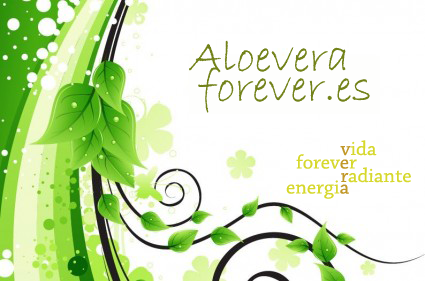
<style>
.page{position:relative;width:425px;height:281px;background:#ffffff}
.page>*{position:absolute;margin:0}
.t1{font:45.8px "BradleyHandITC";color:#728219}
.t2{font:20.8px "ChaparralPro-Regular";color:#d6d82c}
.t3{font:20.8px "ChaparralPro-Regular";color:#c19828}
</style>
<div class="page">
<p class="t1" style="left:189px;top:40px;width:157px;height:32px">Aloevera</p>
<p class="t1" style="left:198px;top:67px;width:172px;height:46px">forever.es</p>
<p class="t2" style="left:340px;top:140px;width:37px;height:16px"><span class="t3">v</span>ida</p>
<p class="t2" style="left:296px;top:154px;width:61px;height:15px">forev<span class="t3">e</span>r</p>
<p class="t2" style="left:341px;top:167px;width:70px;height:16px"><span class="t3">r</span>adiante</p>
<p class="t2" style="left:286px;top:180px;width:63px;height:19px">energi<span class="t3">a</span></p>
</div>
